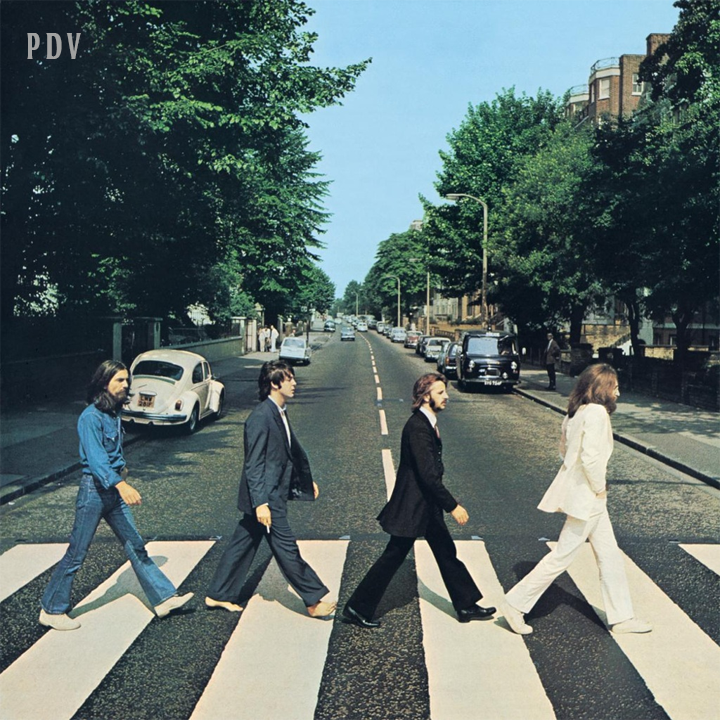
<style>
.page{position:relative;width:720px;height:720px}
.page>*{position:absolute;margin:0}
.t1{font:36px "BOOTLE";letter-spacing:0.075em;color:#a1a2a1;scale:0.93 1}
</style>
<div class="page">
<p class="t1" style="left:27px;top:33px;width:54px;height:26px">PDV</p>
</div>
